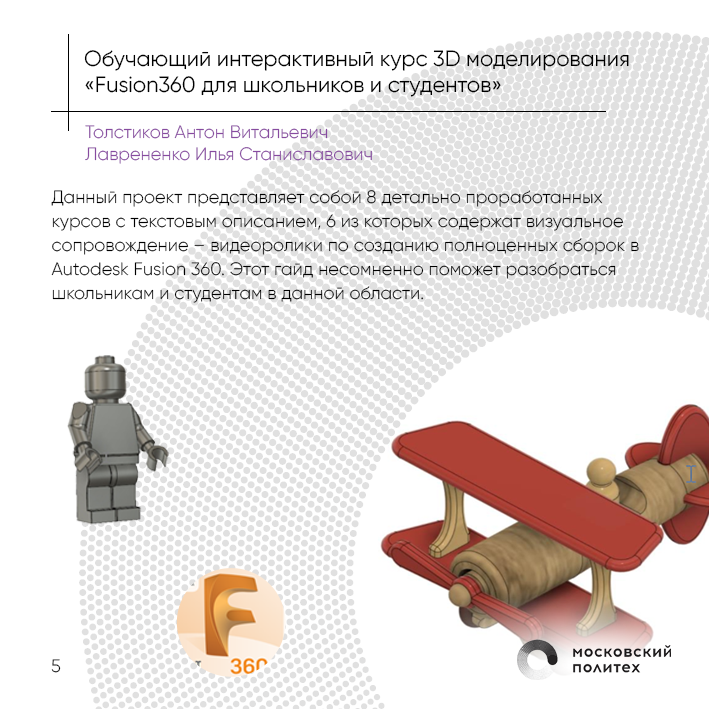
<style>
.page{position:relative;width:709px;height:709px;background:#ffffff}
.page>*{position:absolute;margin:0}
.t1{font:22px "Gilroy-Regular";color:#000000}
.t2{font:18px "Gilroy-Light";color:#874ba0}
.t3{font:18px/24px "Gilroy-Light";color:#000000}
.t4{font:18px "Gilroy-Light";color:#000000}
</style>
<div class="page">
<p class="t1" style="left:84px;top:50px;width:545px;height:47px">Обучающий интерактивный курс 3D моделирования <br>«Fusion360 для школьников и студентов»</p>
<p class="t2" style="left:85px;top:125px;width:287px;height:39px">Толстиков Антон Витальевич<br>Лаврененко Илья Станиславович</p>
<p class="t3" style="left:51px;top:190px;width:588px;height:113px">Данный проект представляет собой 8 детально проработанных<br>курсов с текстовым описанием, 6 из которых содержат визуальное<br>сопровождение – видеоролики по созданию полноценных сборок в Autodesk Fusion 360. Этот гайд несомненно поможет разобраться школьникам и студентам в данной области.</p>
<p class="t4" style="left:51px;top:659px;width:10px;height:14px">5</p>
</div>
